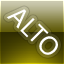
<style>
.page{position:relative;width:64px;height:64px}
.page>*{position:absolute;margin:0}
.t1{font:24px "MicrosoftYaHei";color:#ffffff}
</style>
<div class="page">
<p class="t1" style="left:6px;top:9px;width:52px;height:46px;rotate:45deg">ALTO</p>
</div>
